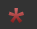
<style>
.page{position:relative;width:37px;height:29px;background:#333333}
.page>*{position:absolute;margin:0}
.t1{font:48px "ArialMT"}
</style>
<div class="page">
<p class="t1" style="left:8px;top:8px;width:16px;height:15px">*</p>
</div>
